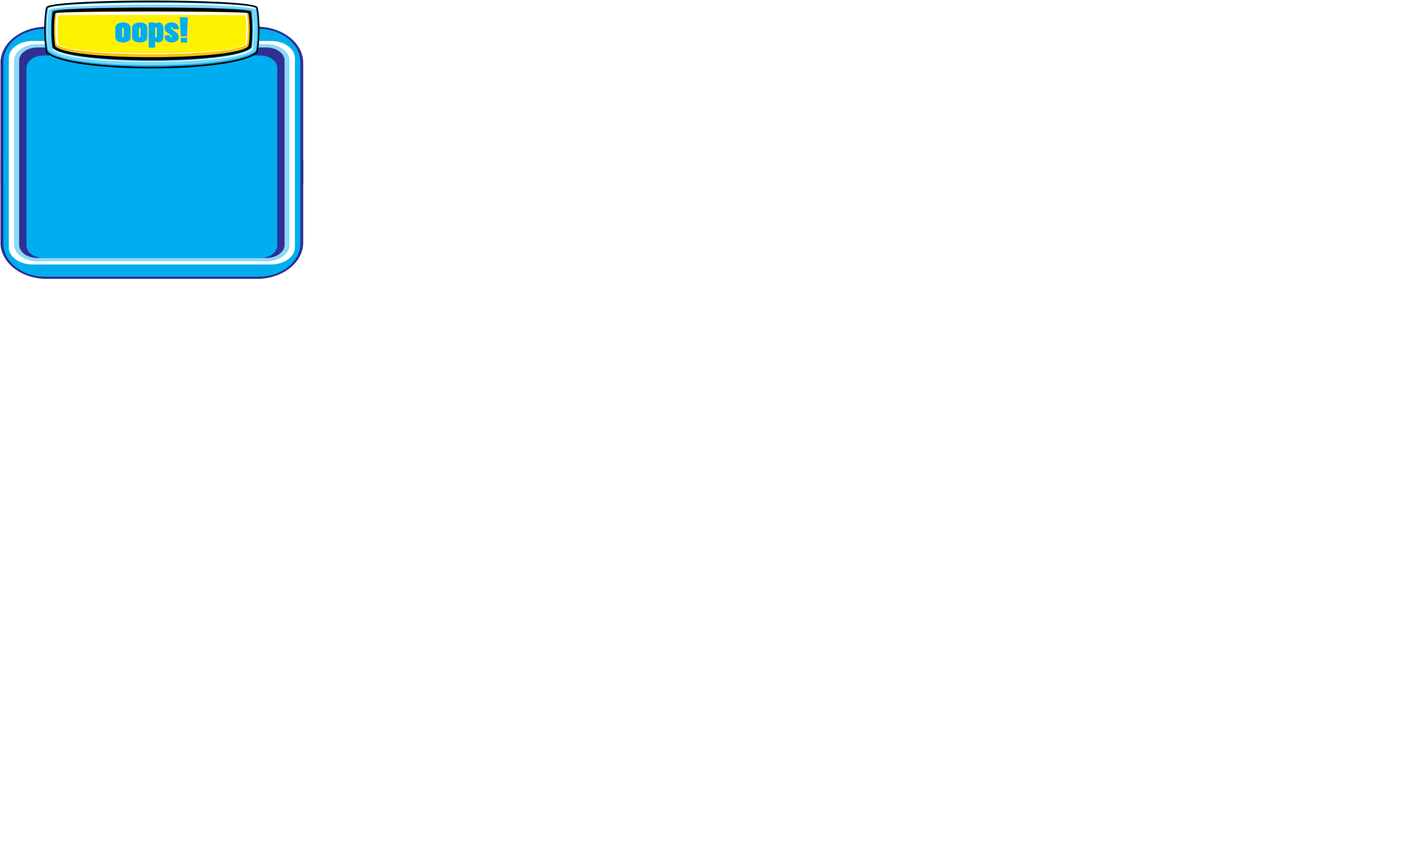
<style>
.page{position:relative;width:1416px;height:842px;background:#ffffff}
.page>*{position:absolute;margin:0}
.t1{font:33.6px "PoplarStd";color:#00aef0;scale:1.31 1}
</style>
<div class="page">
<p class="t1" style="left:115px;top:17px;width:73px;height:31px">oops!</p>
</div>
